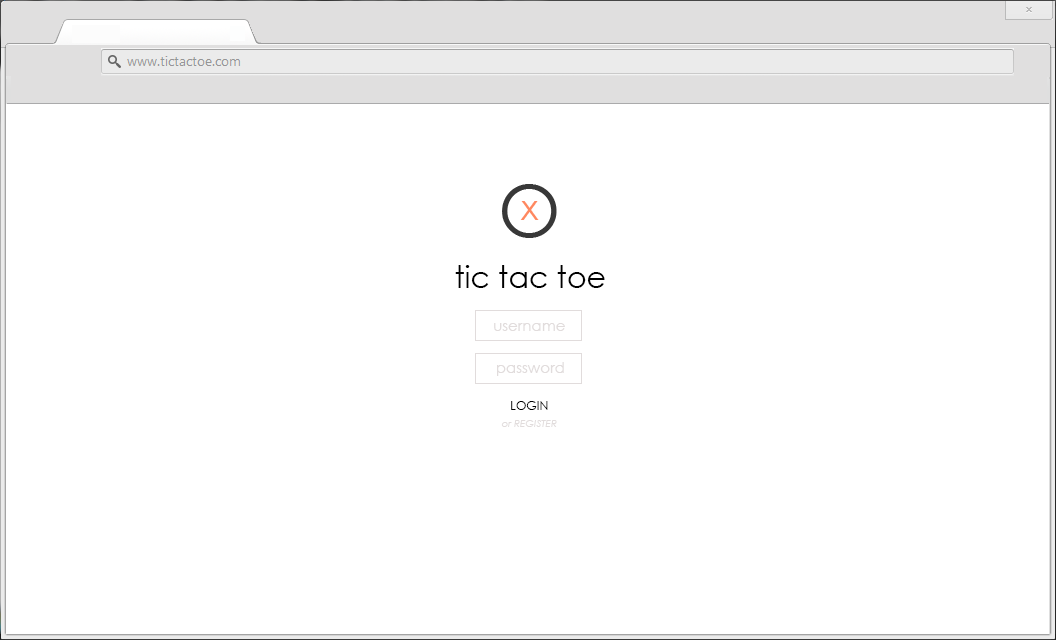
<style>
.page{position:relative;width:1056px;height:640px;background:#ffffff}
.page>*{position:absolute;margin:0}
.t1{font:30px "CenturyGothic";color:#000000}
.t2{font:15px "CenturyGothic";color:#e1dcdc}
.t3{font:12px "CenturyGothic";color:#010101}
.t4{font:10px "CenturyGothic-Italic";color:#e1dcdc}
</style>
<div class="page">
<p class="t1" style="left:455px;top:265px;width:150px;height:23px">tic tac toe</p>
<p class="t2" style="left:494px;top:323px;width:71px;height:8px">username</p>
<p class="t2" style="left:497px;top:362px;width:67px;height:14px">password</p>
<p class="t3" style="left:511px;top:401px;width:37px;height:9px">LOGIN</p>
<p class="t4" style="left:501px;top:420px;width:56px;height:7px">or REGISTER</p>
</div>
